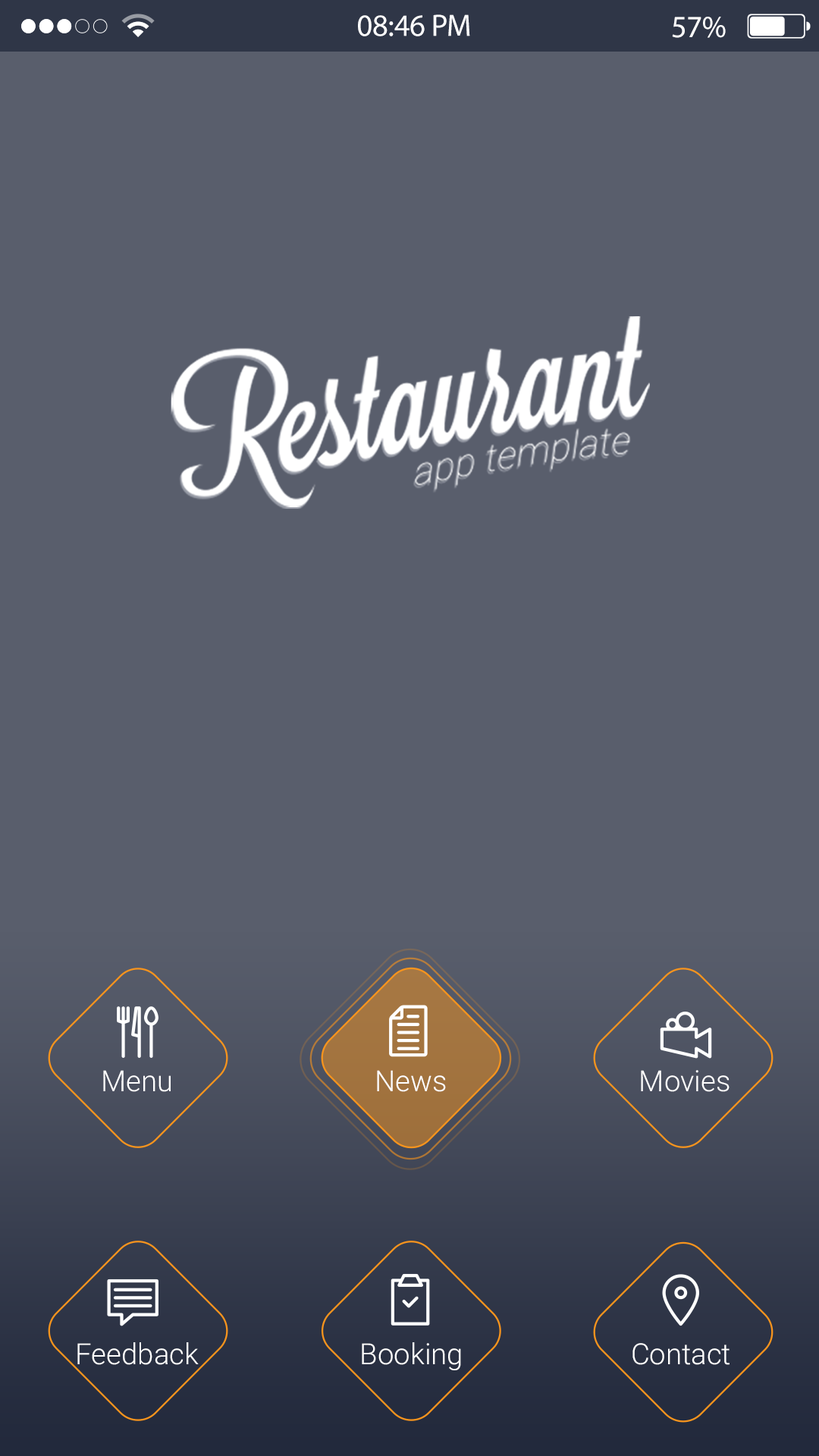
<style>
.page{position:relative;width:819px;height:1456px;background:#595e6c}
.page>*{position:absolute;margin:0}
.t1{font:30.9px "MyriadPro-Regular";color:#fefeff}
.t2{font:30.9px "MyriadPro-Regular";color:#ffffff}
.t3{font:29.1px "Roboto-Light";color:#ffffff}
</style>
<div class="page">
<p class="t1" style="left:358px;top:14px;width:112px;height:22px">08:46 PM</p>
<p class="t2" style="left:672px;top:17px;width:54px;height:21px">57%</p>
<p class="t3" style="left:103px;top:1070px;width:68px;height:22px">Menu</p>
<p class="t3" style="left:377px;top:1070px;width:69px;height:22px">News</p>
<p class="t3" style="left:641px;top:1070px;width:89px;height:22px">Movies</p>
<p class="t3" style="left:77px;top:1342px;width:122px;height:23px">Feedback</p>
<p class="t3" style="left:362px;top:1342px;width:99px;height:28px">Booking</p>
<p class="t3" style="left:632px;top:1343px;width:98px;height:22px">Contact</p>
</div>
